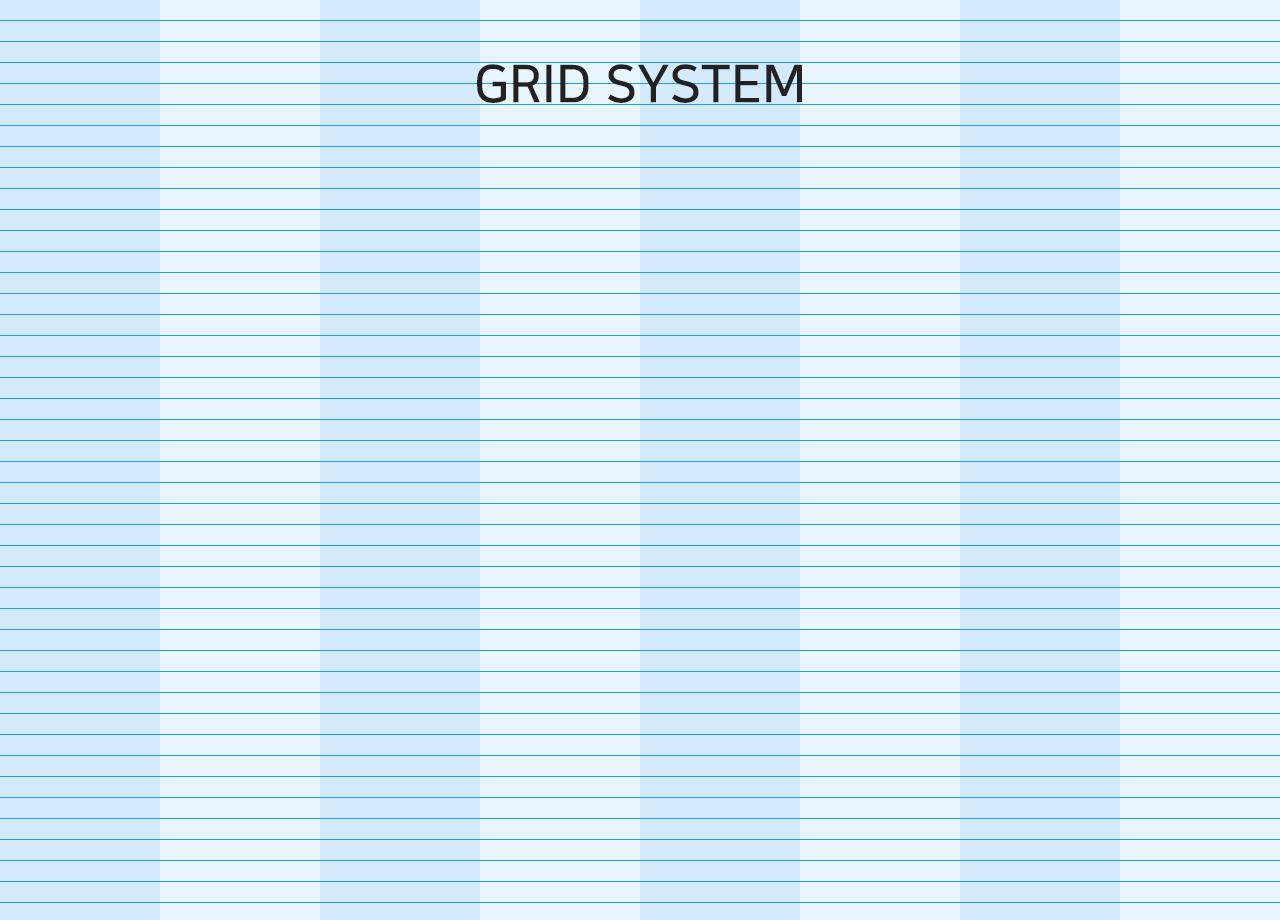
<style>
.page{position:relative;width:1280px;height:920px;background:#e9f5fd}
.page>*{position:absolute;margin:0}
.t1{font:52px "NanumSquareB";color:#222222}
</style>
<div class="page">
<p class="t1" style="left:477px;top:64px;width:325px;height:39px">GRID SYSTEM</p>
</div>
